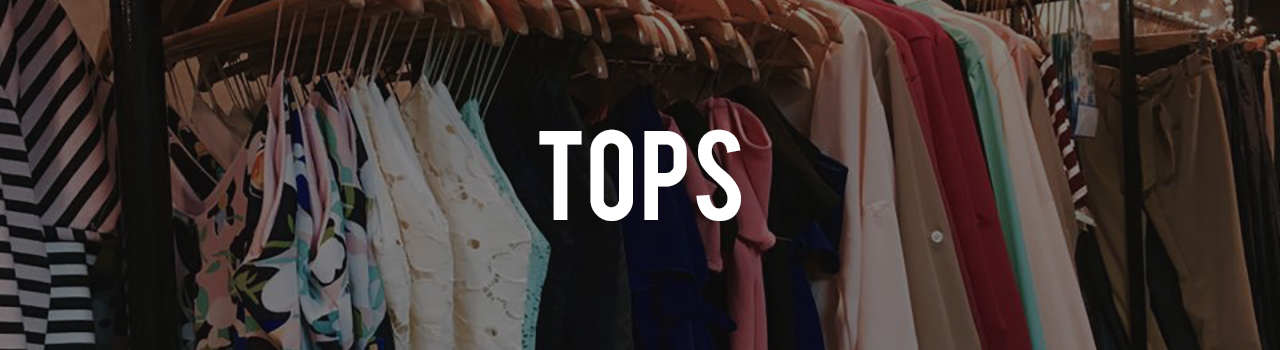
<style>
.page{position:relative;width:1280px;height:350px}
.page>*{position:absolute;margin:0}
.t1{font:100px "Bebas";color:#ffffff}
</style>
<div class="page">
<p class="t1" style="left:539px;top:129px;width:202px;height:92px">TOPS</p>
</div>
